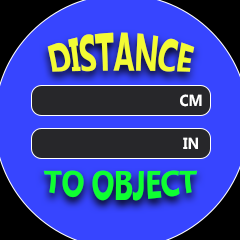
<style>
.page{position:relative;width:240px;height:240px;background:#3745ff}
.page>*{position:absolute;margin:0}
.t1{font:30px "MicrosoftPhagsPa-Bold";letter-spacing:-0.02em;color:#f4fb34;scale:0.92 1}
.t2{font:16px "MicrosoftPhagsPa-Bold";letter-spacing:-0.02em;color:#ffffff;scale:0.92 1}
.t3{font:30px "MicrosoftPhagsPa-Bold";letter-spacing:-0.02em;color:#0fff31;scale:0.92 1}
</style>
<div class="page">
<p class="t1" style="left:47px;top:32px;width:148px;height:40px">DISTANCE</p>
<p class="t2" style="left:180px;top:94px;width:22px;height:13px">CM</p>
<p class="t2" style="left:183px;top:137px;width:15px;height:12px">IN</p>
<p class="t3" style="left:43px;top:170px;width:155px;height:31px">TO OBJECT</p>
</div>
